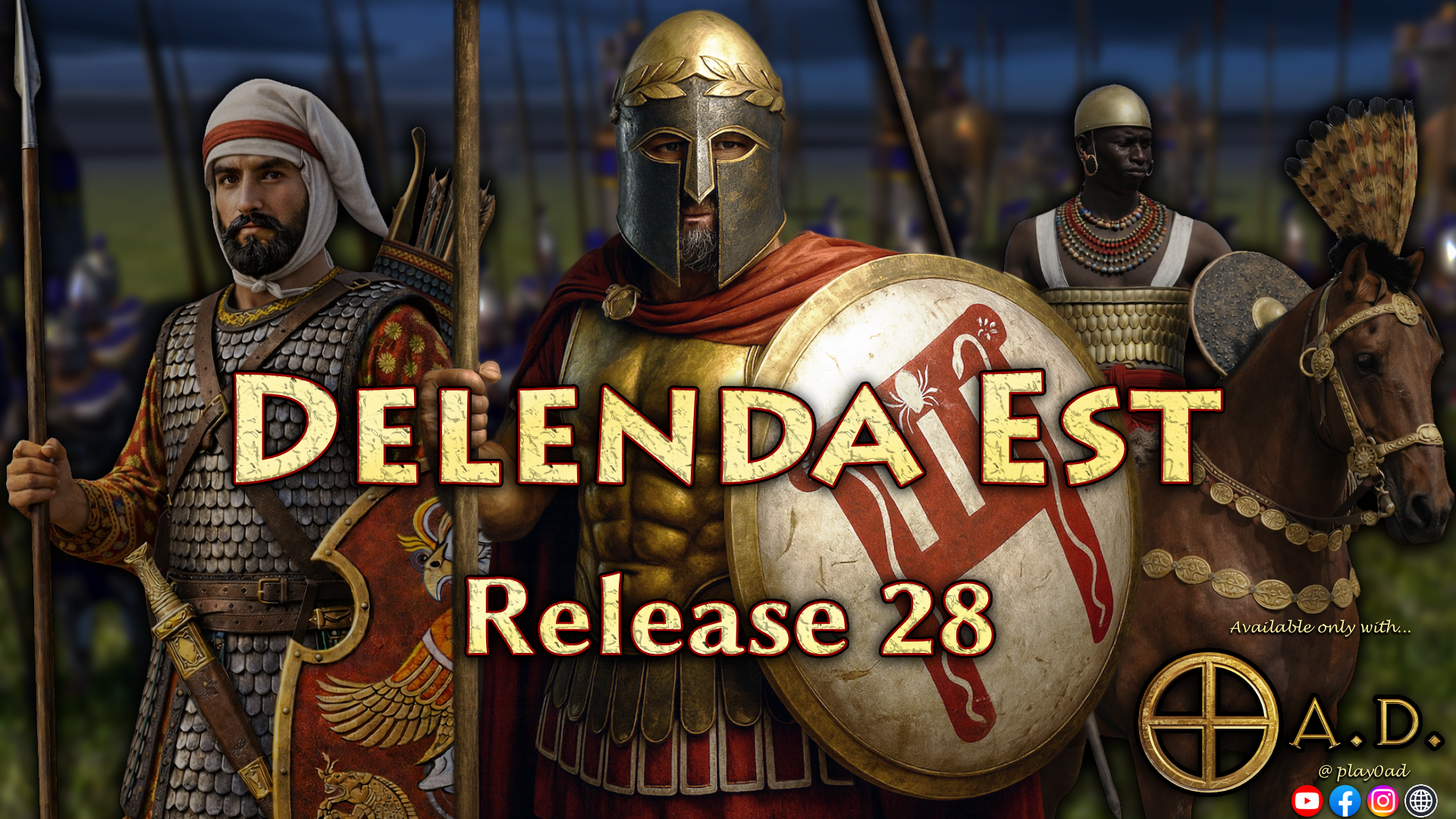
<style>
.page{position:relative;width:1456px;height:819px}
.page>*{position:absolute;margin:0}
.t1{font:151.7px "Lithos-Bold";color:#fbee9d}
.t2{font:113.7px "LinBiolinumOB";color:#fef5aa}
.t3{font:15.2px "LucidaHandwriting-Italic";color:#fbee9d}
</style>
<div class="page">
<p class="t1" style="left:235px;top:372px;width:986px;height:113px">Delenda Est</p>
<p class="t2" style="left:468px;top:573px;width:524px;height:81px">Release 28</p>
<p class="t3" style="left:1229px;top:619px;width:181px;height:18px">Available only with...</p>
<p class="t3" style="left:1319px;top:763px;width:92px;height:19px">@ play0ad</p>
</div>
